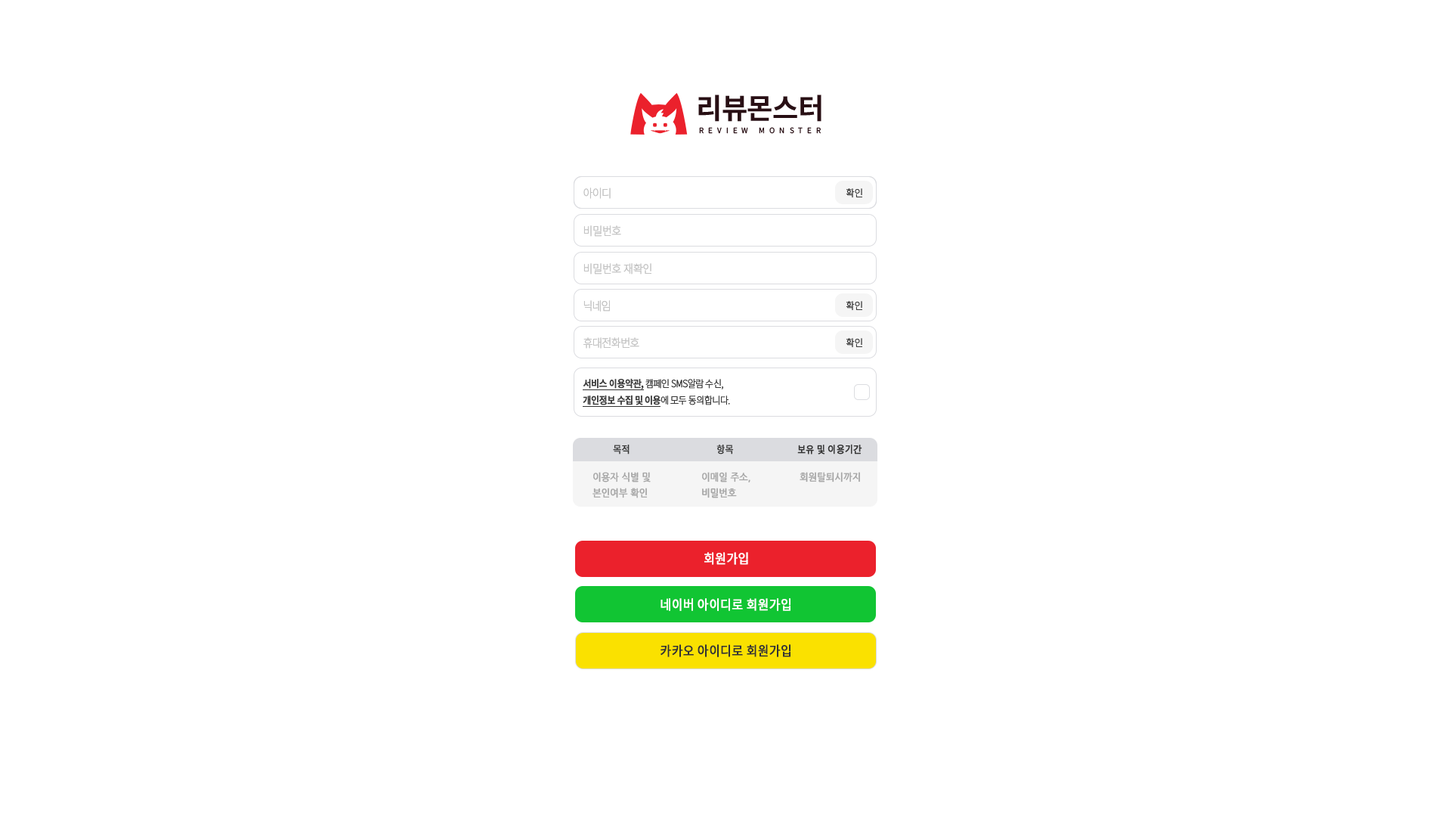
<style>
.page{position:relative;width:1451px;height:822px;background:#ffffff}
.page>*{position:absolute;margin:0}
.t1{font:11.6px "NotoSansKR-Thin";letter-spacing:-0.06em;color:#c3c3c3;font-weight:bold;scale:0.91 1}
.t2{font:10px "NotoSansKR-Thin";letter-spacing:-0.02em;color:#3a3a3a;font-weight:bold;scale:0.91 1}
.t3{font:11.6px "NotoSansKR-Thin";letter-spacing:-0.04em;color:#c3c3c3;font-weight:bold;scale:0.91 1}
.t4{font:11.6px "NotoSansKR-Thin";letter-spacing:-0.08em;color:#c3c3c3;font-weight:bold;scale:0.91 1}
.t5{font:10px/16.6px "NotoSansKR-Thin";letter-spacing:-0.06em;color:#3a3a3a;font-weight:bold;scale:0.91 1}
.t6{font:10px/16.6px "NotoSansKR-Medium";letter-spacing:-0.06em;color:#3a3a3a;font-weight:bold;scale:0.91 1}
.t7{font:10px "NotoSansKR-Regular";color:#333333;font-weight:bold;scale:0.91 1}
.t8{font:10px/15.9px "NanumGothic";color:#a5a5a5;font-weight:bold;scale:0.91 1}
.t9{font:10px "NanumGothic";color:#a5a5a5;font-weight:bold;scale:0.91 1}
.t10{font:13.3px "NotoSansKR-Regular";color:#ffffff;font-weight:bold;scale:0.91 1}
.t11{font:13.3px "NotoSansKR-Regular";color:#333333;font-weight:bold;scale:0.91 1}
</style>
<div class="page">
<p class="t1" style="left:584px;top:187px;width:27px;height:12px">아이디</p>
<p class="t2" style="left:846px;top:188px;width:16px;height:10px">확인</p>
<p class="t3" style="left:584px;top:225px;width:37px;height:12px">비밀번호</p>
<p class="t3" style="left:584px;top:263px;width:68px;height:11px">비밀번호 재확인</p>
<p class="t4" style="left:584px;top:300px;width:26px;height:11px">닉네임</p>
<p class="t2" style="left:846px;top:301px;width:16px;height:10px">확인</p>
<p class="t1" style="left:584px;top:337px;width:55px;height:11px">휴대전화번호</p>
<p class="t2" style="left:846px;top:338px;width:16px;height:10px">확인</p>
<p class="t5" style="left:583px;top:378px;width:147px;height:27px"><span class="t6">서비스 이용약관, </span>캠페인 SMS알람 수신, <br><span class="t6">개인정보 수집 및 이용</span>에 모두 동의합니다.</p>
<p class="t7" style="left:613px;top:444px;width:17px;height:10px">목적</p>
<p class="t7" style="left:717px;top:444px;width:17px;height:10px">항목</p>
<p class="t7" style="left:797px;top:444px;width:65px;height:10px">보유 및 이용기간</p>
<p class="t8" style="left:593px;top:472px;width:58px;height:26px">이용자 식별 및<br>본인여부 확인</p>
<p class="t8" style="left:702px;top:472px;width:49px;height:26px">이메일 주소,<br>비밀번호</p>
<p class="t9" style="left:800px;top:472px;width:60px;height:10px">회원탈퇴시까지</p>
<p class="t10" style="left:704px;top:552px;width:44px;height:13px">회원가입</p>
<p class="t10" style="left:661px;top:598px;width:130px;height:13px">네이버 아이디로 회원가입</p>
<p class="t11" style="left:661px;top:644px;width:130px;height:13px">카카오 아이디로 회원가입</p>
</div>
